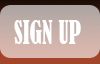
<style>
.page{position:relative;width:100px;height:64px}
.page>*{position:absolute;margin:0}
.t1{font:30px "BernardMT-Condensed";color:#ffffff;scale:0.78 1}
</style>
<div class="page">
<p class="t1" style="left:14px;top:20px;width:67px;height:24px">SIGN UP</p>
</div>
